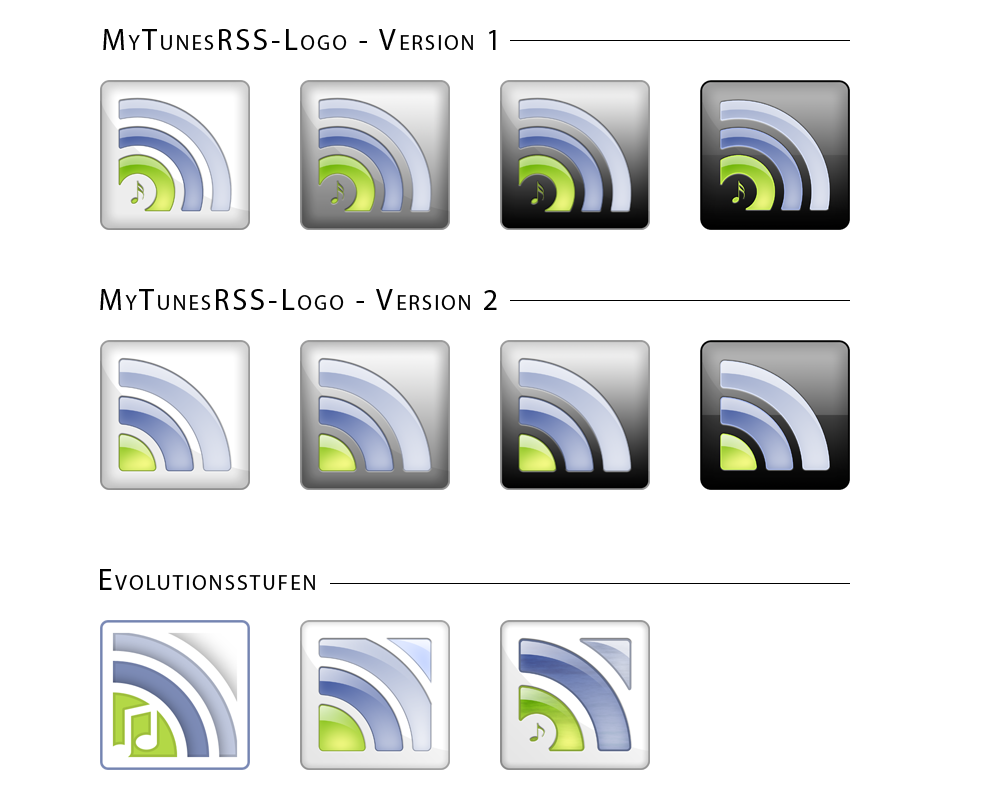
<style>
.page{position:relative;width:1000px;height:800px;background:#ffffff}
.page>*{position:absolute;margin:0}
.t1{font:30px "MyriadPro-Regular";letter-spacing:0.1em;color:#000000;font-variant:small-caps}
</style>
<div class="page">
<p class="t1" style="left:103px;top:29px;width:393px;height:21px">MyTunesRSS-Logo - Version 1</p>
<p class="t1" style="left:100px;top:289px;width:397px;height:21px">MyTunesRSS-Logo - Version 2</p>
<p class="t1" style="left:100px;top:569px;width:215px;height:21px">Evolutionsstufen</p>
</div>
